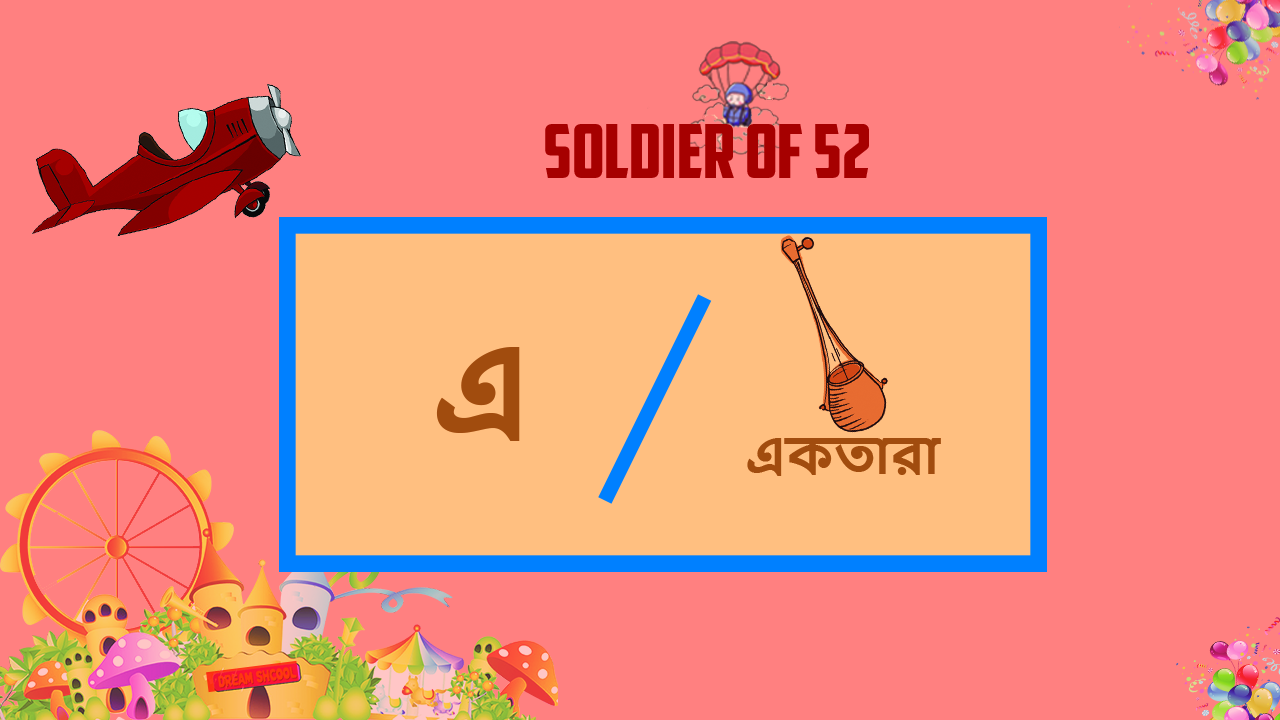
<style>
.page{position:relative;width:1280px;height:720px;background:#ff8080}
.page>*{position:absolute;margin:0}
.t1{font:74.5px "AmericanCaptain";color:#a60000}
.t2{font:122.1px "NirmalaUI-Bold";color:#a24b0d}
.t3{font:49.7px "NirmalaUI-Bold";color:#a24b0d}
</style>
<div class="page">
<p class="t1" style="left:545px;top:124px;width:324px;height:54px">SOLDIER OF 52</p>
<p class="t2" style="left:436px;top:347px;width:84px;height:94px">এ</p>
<p class="t3" style="left:747px;top:438px;width:194px;height:38px">একতারা</p>
</div>
